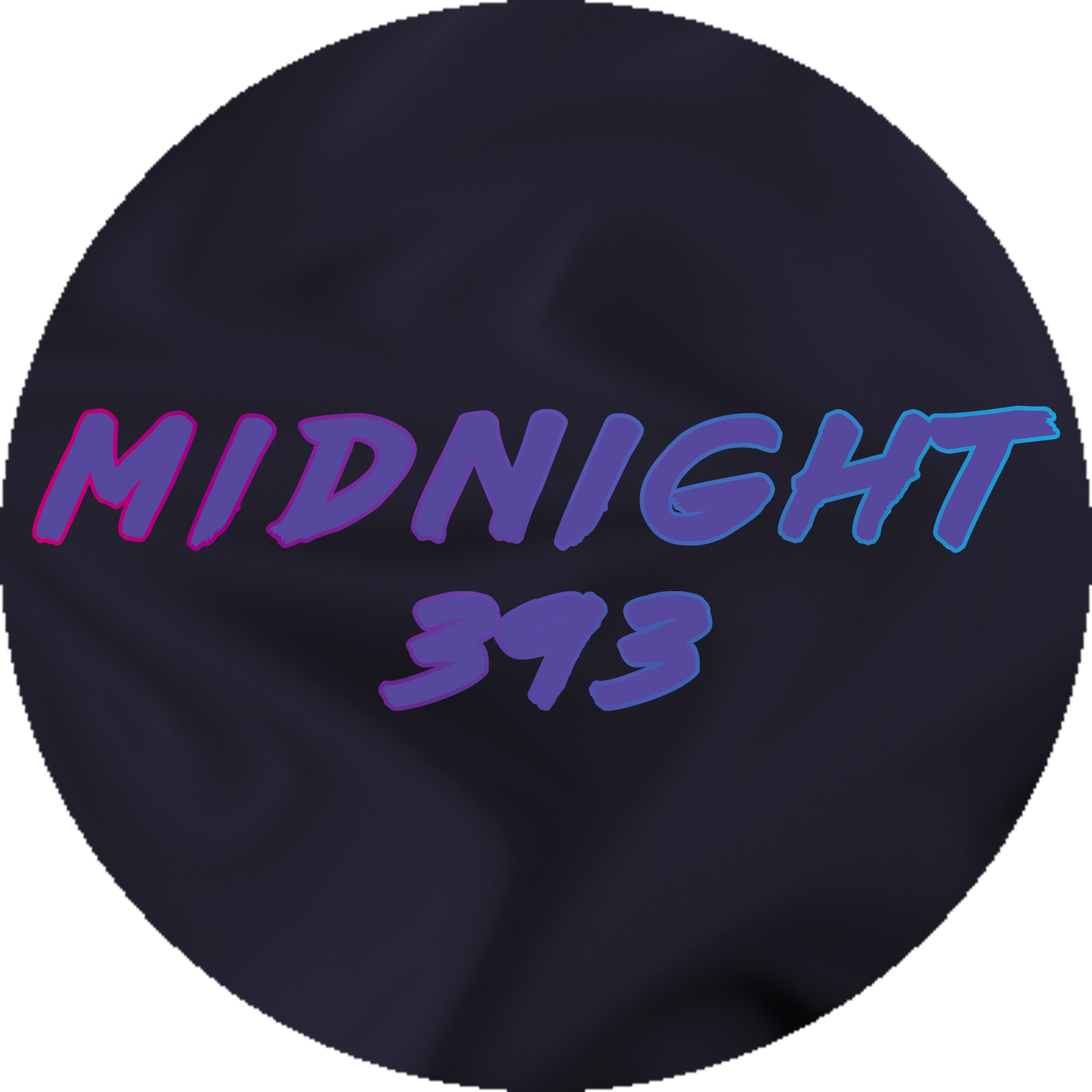
<style>
.page{position:relative;width:1092px;height:1092px;background:#ffffff}
.page>*{position:absolute;margin:0}
.t1{font:151.7px "lazer84";letter-spacing:0.2em;color:#55489d}
</style>
<div class="page">
<p class="t1" style="left:36px;top:410px;width:1020px;height:297px;text-align:center">Midnight<br>393</p>
</div>
